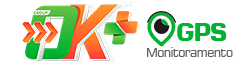
<style>
.page{position:relative;width:240px;height:64px;background:#ffffff}
.page>*{position:absolute;margin:0}
.t1{font:24.6px "Square721BT-Bold";letter-spacing:-0.05em;color:#00b132}
.t2{font:12.7px "Square721BT-Roman";letter-spacing:-0.05em;color:#626362}
</style>
<div class="page">
<p class="t1" style="left:177px;top:23px;width:50px;height:18px">GPS</p>
<p class="t2" style="left:147px;top:47px;width:86px;height:10px">Monitoramento</p>
</div>
